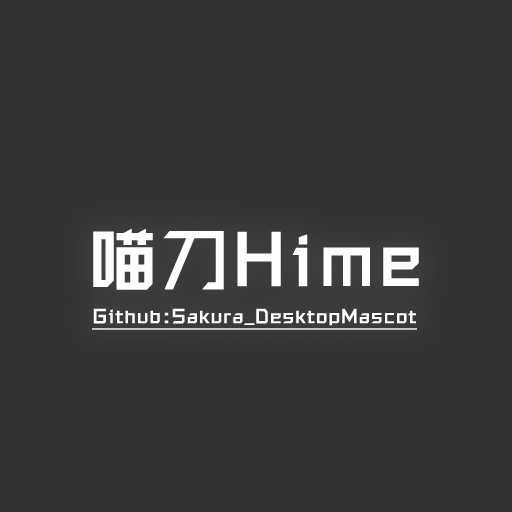
<style>
.page{position:relative;width:512px;height:512px;background:#333333}
.page>*{position:absolute;margin:0}
.t1{font:70.3px "REEJI-Honghuangli-MediumGB1.0";color:#ffffff;font-weight:bold}
.t2{font:18.5px "REEJI-Honghuangli-MediumGB1.0";color:#ffffff;font-weight:bold}
</style>
<div class="page">
<p class="t1" style="left:93px;top:229px;width:326px;height:61px">喵刀Hime</p>
<p class="t2" style="left:93px;top:308px;width:323px;height:18px">Github:Sakura_DesktopMascot</p>
</div>
